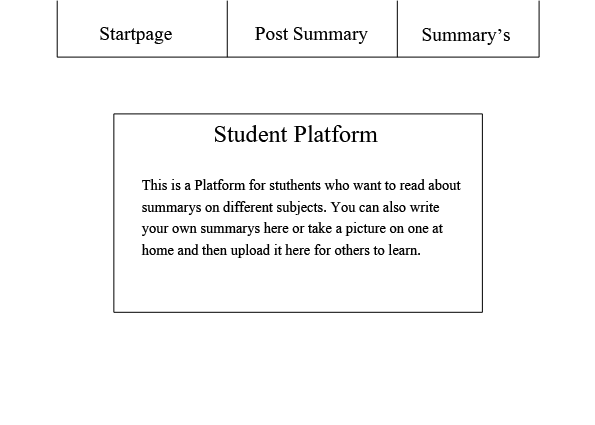
<style>
.page{position:relative;width:595px;height:425px;background:#ffffff}
.page>*{position:absolute;margin:0}
.t1{font:24px "Aparajita";color:#000000}
.t2{font:30px "Aparajita";color:#000000}
.t3{font:18px "Aparajita";color:#000000}
</style>
<div class="page">
<p class="t1" style="left:100px;top:27px;width:72px;height:17px">Startpage</p>
<p class="t1" style="left:255px;top:27px;width:113px;height:17px">Post Summary</p>
<p class="t1" style="left:422px;top:28px;width:88px;height:17px">Summary’s</p>
<p class="t2" style="left:215px;top:125px;width:163px;height:17px">Student Platform</p>
<p class="t3" style="left:141px;top:179px;width:320px;height:79px">This is a Platform for stuthents who want to read about summarys on different subjects. You can also write your own summarys here or take a picture on one at home and then upload it here for others to learn.</p>
</div>
